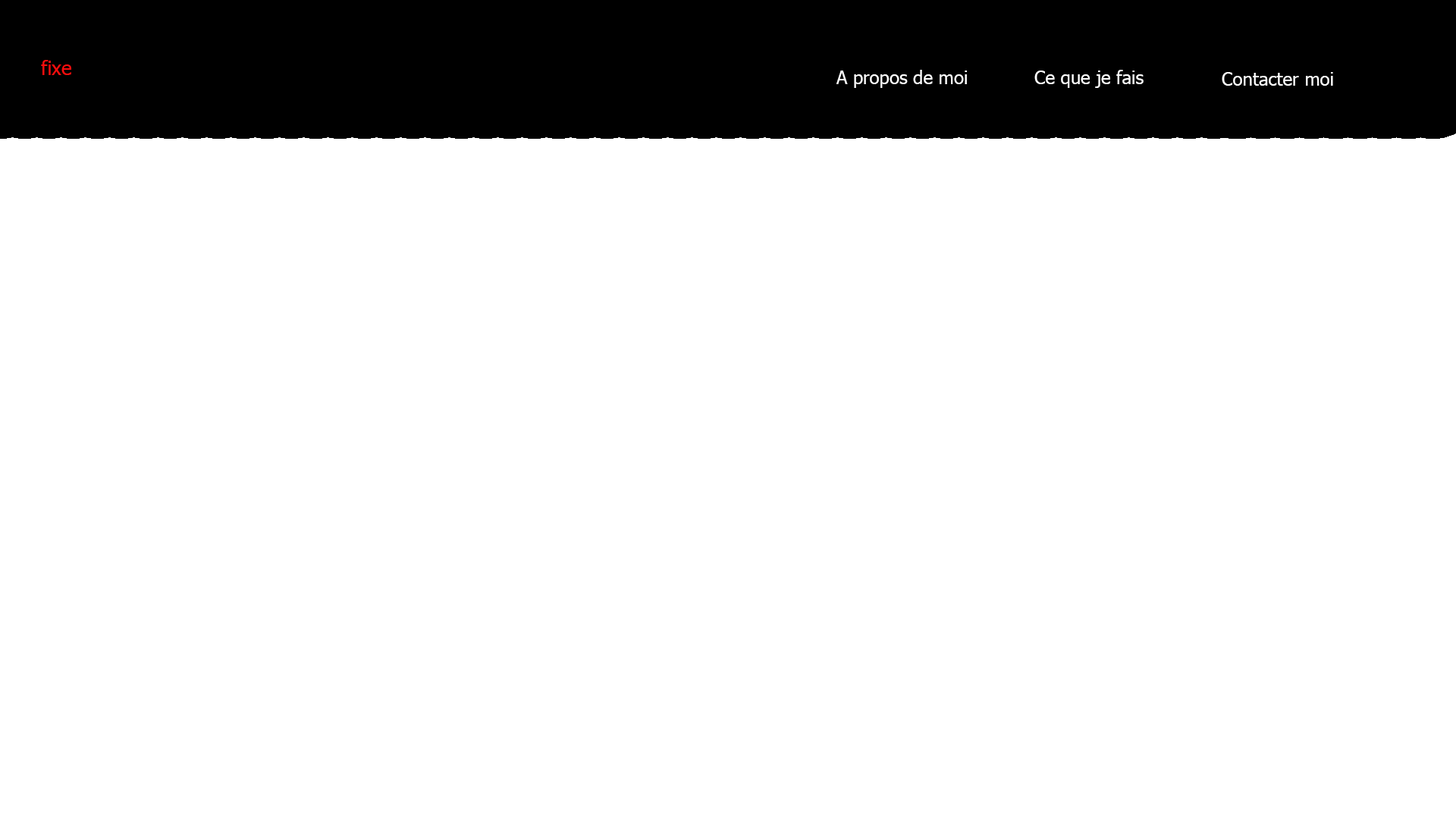
<style>
.page{position:relative;width:1456px;height:819px;background:#ffffff}
.page>*{position:absolute;margin:0}
.t1{font:19.7px "Tahoma";color:#f70e0e}
.t2{font:18.2px "Tahoma";color:#ffffff}
</style>
<div class="page">
<p class="t1" style="left:41px;top:60px;width:30px;height:15px">fixe</p>
<p class="t2" style="left:836px;top:70px;width:131px;height:18px">A propos de moi</p>
<p class="t2" style="left:1034px;top:70px;width:110px;height:18px">Ce que je fais</p>
<p class="t2" style="left:1222px;top:72px;width:111px;height:14px">Contacter moi</p>
</div>
